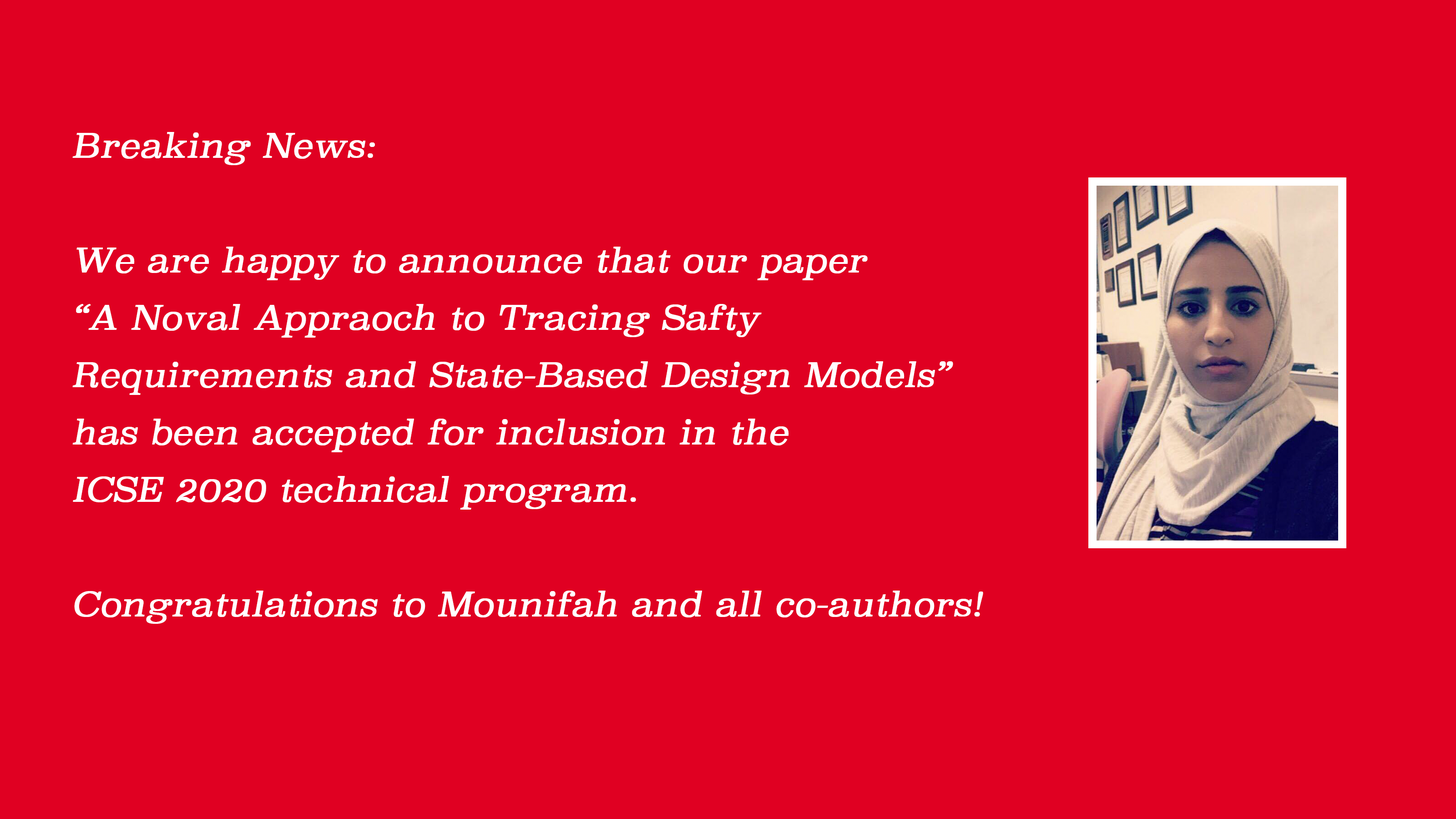
<style>
.page{position:relative;width:1456px;height:819px;background:#e00022}
.page>*{position:absolute;margin:0}
.t1{font:32.8px "Superclarendon-LightItalic";color:#ffffff;font-weight:bold}
</style>
<div class="page">
<p class="t1" style="left:72px;top:132px;width:911px;height:492px">Breaking News:<br><br>We are happy to announce that our paper <br>“A Noval Appraoch to Tracing Safty <br>Requirements and State-Based Design Models”<br>has been accepted for inclusion in the <br>ICSE 2020 technical program.<br><br>Congratulations to Mounifah and all co-authors!</p>
</div>
